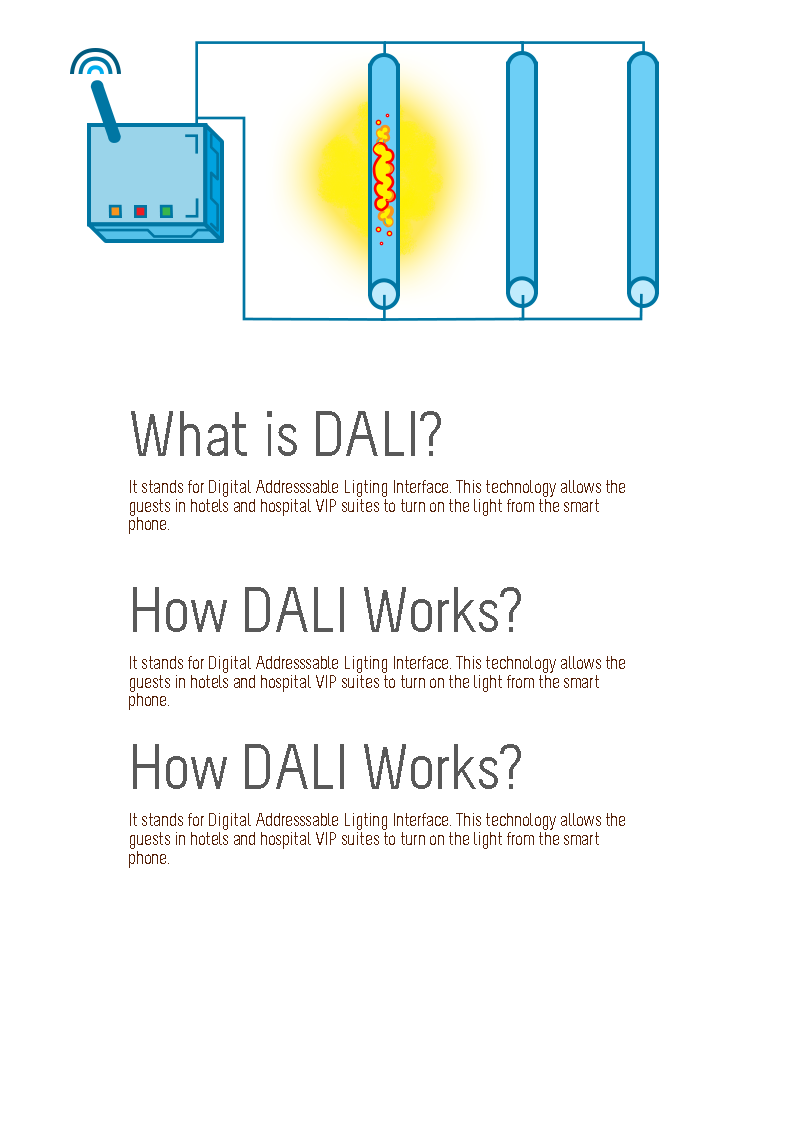
<style>
.page{position:relative;width:799px;height:1132px;background:#ffffff}
.page>*{position:absolute;margin:0}
.t1{font:18.7px/18.7px "Melbourne";letter-spacing:-0.015em;color:#57240c}
.t2{font:64px/64px "Melbourne";letter-spacing:-0.015em;color:#595959}
</style>
<div class="page">
<p class="t1" style="left:129px;top:411px;width:496px;height:457px"><span class="t2">What is DALI?<br></span><br>It stands for Digital Addresssable Ligting Interface. This technology allows the guests in hotels and hospital VIP suites to turn on the light from the smartphone.<br><br><br><span class="t2">How DALI Works?<br></span><br>It stands for Digital Addresssable Ligting Interface. This technology allows the guests in hotels and hospital VIP suites to turn on the light from the smartphone.<br><br><span class="t2">How DALI Works?<br></span><br>It stands for Digital Addresssable Ligting Interface. This technology allows the guests in hotels and hospital VIP suites to turn on the light from the smartphone.</p>
</div>
